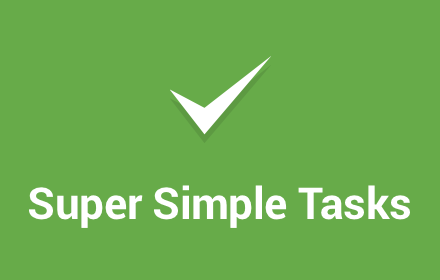
<style>
.page{position:relative;width:440px;height:280px;background:#67ab49}
.page>*{position:absolute;margin:0}
.t1{font:44px "Roboto-Bold";letter-spacing:-0.01em;color:#ffffff}
</style>
<div class="page">
<p class="t1" style="left:29px;top:185px;width:381px;height:43px">Super Simple Tasks</p>
</div>
